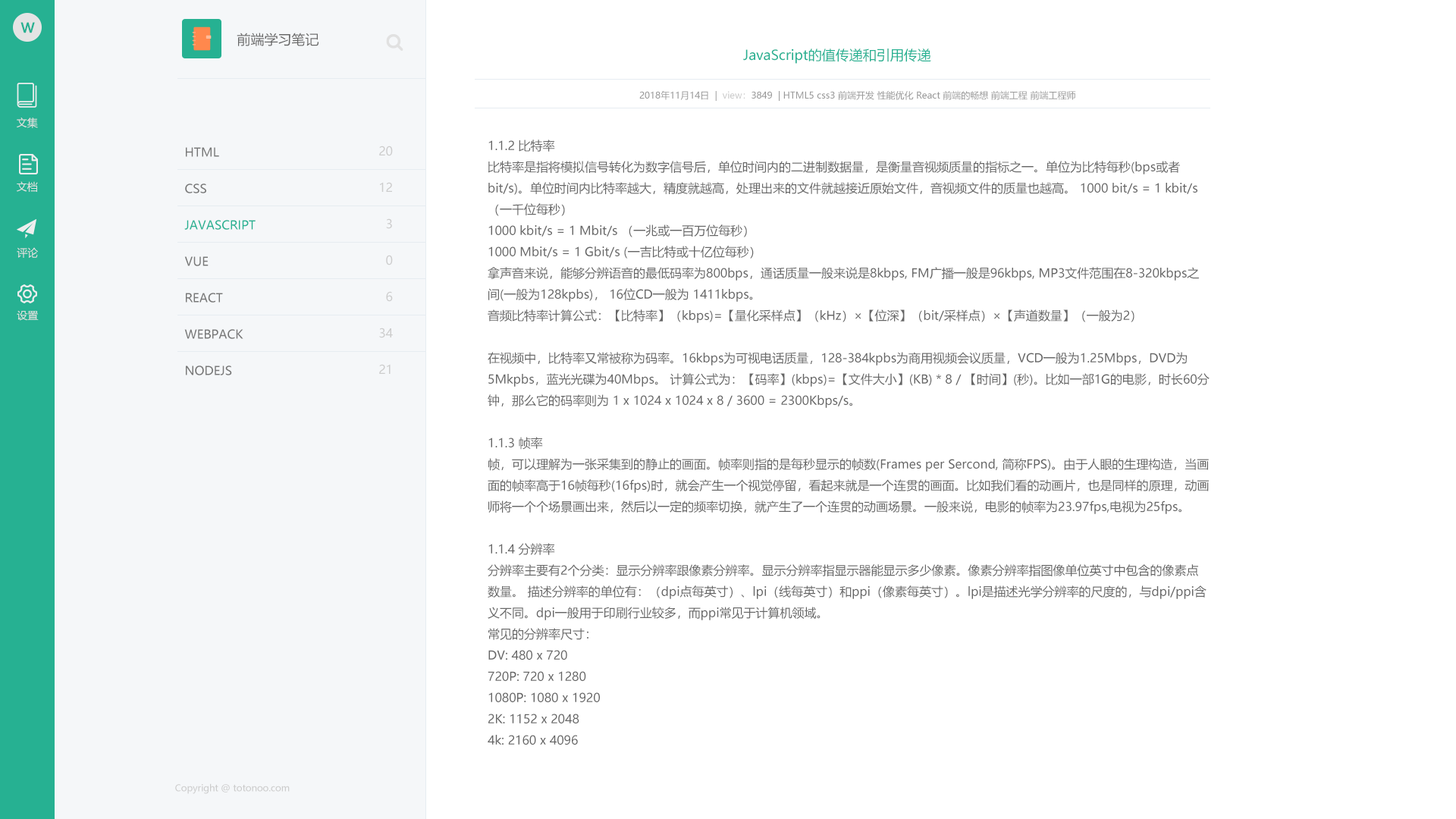
<style>
.page{position:relative;width:1456px;height:819px;background:#ffffff}
.page>*{position:absolute;margin:0}
.t1{font:13.6px "MicrosoftYaHei";color:#26b192;font-weight:bold}
.t2{font:13.6px "MicrosoftYaHei";color:#666666}
.t3{font:13.6px "MicrosoftYaHei";color:#26b192}
.t4{font:9.1px "MicrosoftYaHei";color:#999999}
.t5{font:9.1px "MicrosoftYaHei";color:#cccccc}
.t6{font:10.6px "MicrosoftYaHei";color:#e4e4e4}
.t7{font:12.1px/36.4px "MicrosoftYaHei";color:#777777}
.t8{font:12.1px/36.4px "MicrosoftYaHei";color:#26b192}
.t9{font:12.1px/36.4px "MicrosoftYaHei";color:#cccccc}
.t10{font:12.1px/21.2px "MicrosoftYaHei";color:#666666}
</style>
<div class="page">
<p class="t1" style="left:20px;top:22px;width:15px;height:11px">W</p>
<p class="t2" style="left:237px;top:33px;width:82px;height:13px">前端学习笔记</p>
<p class="t3" style="left:743px;top:49px;width:188px;height:15px">JavaScript的值传递和引用传递</p>
<p class="t4" style="left:639px;top:90px;width:437px;height:11px">2018年11月14日  |  <span class="t5">view：</span>3849  | HTML5 css3 前端开发 性能优化 React 前端的畅想 前端工程 前端工程师</p>
<p class="t6" style="left:17px;top:118px;width:21px;height:10px">文集</p>
<p class="t7" style="left:184px;top:147px;width:72px;height:228px">HTML<br>CSS<br><span class="t8">JAVASCRIPT<br></span>VUE<br>REACT<br>WEBPACK<br>NODEJS</p>
<p class="t9" style="left:379px;top:146px;width:14px;height:228px;text-align:right">20<br>12<br>3<br>0<br>6<br>34<br>21</p>
<p class="t10" style="left:488px;top:140px;width:722px;height:605px">1.1.2 比特率<br>比特率是指将模拟信号转化为数字信号后，单位时间内的二进制数据量，是衡量音视频质量的指标之一。单位为比特每秒(bps或者bit/s)。单位时间内比特率越大，精度就越高，处理出来的文件就越接近原始文件，音视频文件的质量也越高。 1000 bit/s = 1 kbit/s （一千位每秒）<br>1000 kbit/s = 1 Mbit/s （一兆或一百万位每秒）<br>1000 Mbit/s = 1 Gbit/s (一吉比特或十亿位每秒）<br>拿声音来说，能够分辨语音的最低码率为800bps，通话质量一般来说是8kbps, FM广播一般是96kbps, MP3文件范围在8-320kbps之间(一般为128kpbs)， 16位CD一般为 1411kbps。<br>音频比特率计算公式：【比特率】（kbps)=【量化采样点】（kHz）×【位深】（bit/采样点）×【声道数量】（一般为2）<br><br>在视频中，比特率又常被称为码率。16kbps为可视电话质量，128-384kpbs为商用视频会议质量，VCD一般为1.25Mbps，DVD为5Mkpbs，蓝光光碟为40Mbps。 计算公式为：【码率】(kbps)=【文件大小】(KB) * 8 / 【时间】(秒)。比如一部1G的电影，时长60分钟，那么它的码率则为 1 x 1024 x 1024 x 8 / 3600 = 2300Kbps/s。<br><br>1.1.3 帧率<br>帧，可以理解为一张采集到的静止的画面。帧率则指的是每秒显示的帧数(Frames per Sercond, 简称FPS)。由于人眼的生理构造，当画面的帧率高于16帧每秒(16fps)时，就会产生一个视觉停留，看起来就是一个连贯的画面。比如我们看的动画片，也是同样的原理，动画师将一个个场景画出来，然后以一定的频率切换，就产生了一个连贯的动画场景。一般来说，电影的帧率为23.97fps,电视为25fps。<br><br>1.1.4 分辨率<br>分辨率主要有2个分类：显示分辨率跟像素分辨率。显示分辨率指显示器能显示多少像素。像素分辨率指图像单位英寸中包含的像素点数量。 描述分辨率的单位有：（dpi点每英寸）、lpi（线每英寸）和ppi（像素每英寸）。lpi是描述光学分辨率的尺度的，与dpi/ppi含义不同。dpi一般用于印刷行业较多，而ppi常见于计算机领域。<br>常见的分辨率尺寸：<br>DV: 480 x 720<br>720P: 720 x 1280<br>1080P: 1080 x 1920<br>2K: 1152 x 2048<br>4k: 2160 x 4096</p>
<p class="t6" style="left:17px;top:181px;width:21px;height:11px">文档</p>
<p class="t6" style="left:17px;top:247px;width:21px;height:11px">评论</p>
<p class="t6" style="left:17px;top:310px;width:22px;height:11px">设置</p>
<p class="t5" style="left:175px;top:783px;width:115px;height:11px">Copyright @ totonoo.com</p>
</div>
